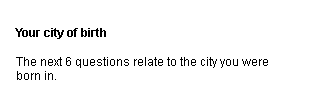
<style>
.page{position:relative;width:318px;height:111px;background:#ffffff}
.page>*{position:absolute;margin:0}
.t1{font:12px "ArialMT";color:#000000}
.t2{font:12px "Arial-BoldMT";color:#000000}
</style>
<div class="page">
<p class="t1" style="left:15px;top:28px;width:253px;height:52px"><span class="t2">Your city of birth<br></span><br>The next 6 questions relate to the city you were<br>born in.</p>
</div>
